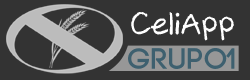
<style>
.page{position:relative;width:250px;height:80px;background:#333333}
.page>*{position:absolute;margin:0}
.t1{font:30px "AxureHandwriting";color:#ffffff}
</style>
<div class="page">
<p class="t1" style="left:131px;top:12px;width:103px;height:29px">CeliApp</p>
</div>
